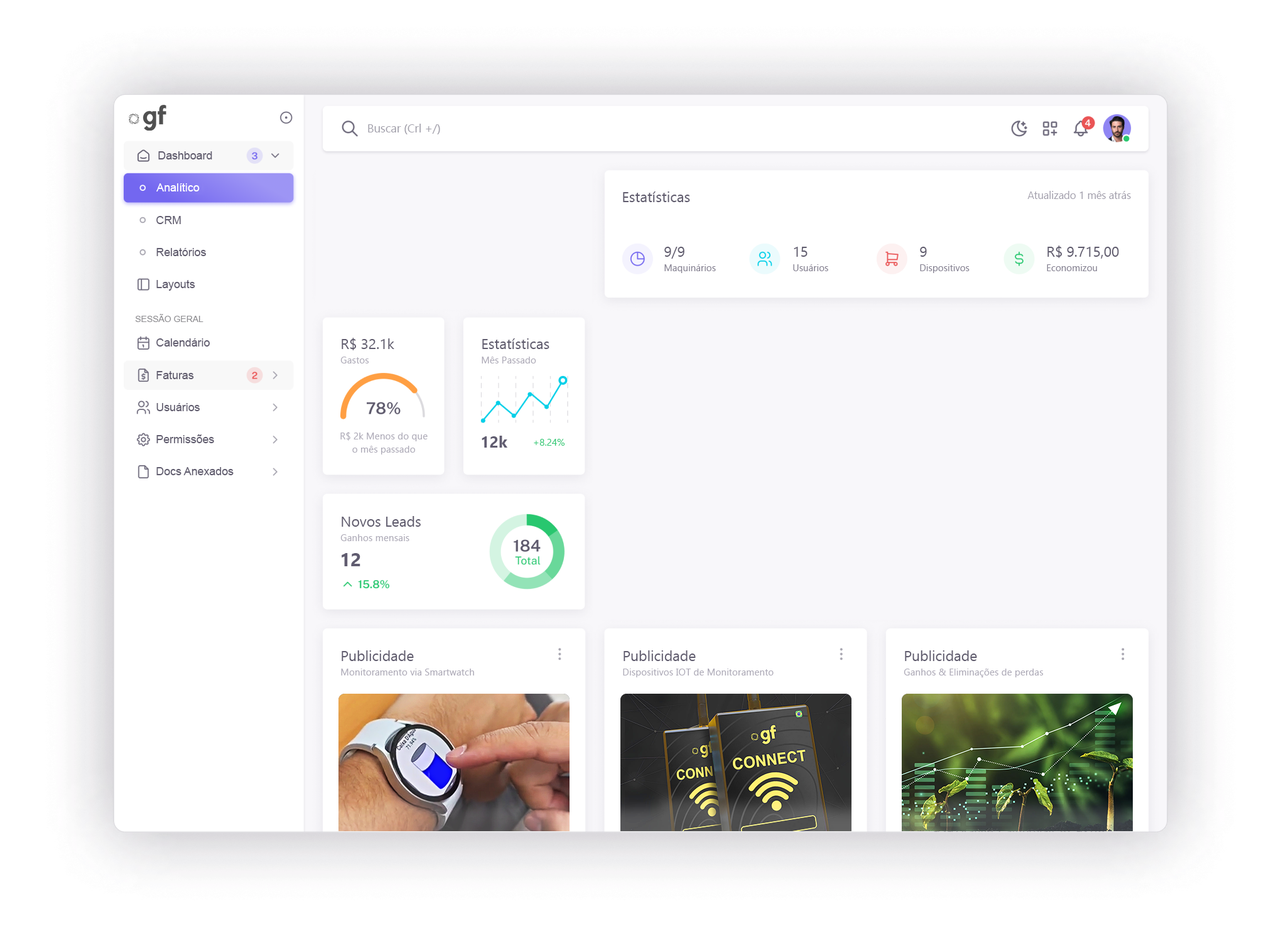
<style>
.page{position:relative;width:1281px;height:931px;background:#ffffff}
.page>*{position:absolute;margin:0}
.t1{font:11.6px "Ebrima";color:#a3a1ac}
.t2{font:11.4px "ArialMT";color:#605c6e}
.t3{font:11.4px "ArialMT";color:#ffffff}
.t4{font:14.4px "Ebrima";color:#605c6e}
.t5{font:10.4px "Ebrima";color:#a29fac}
.t6{font:9.5px "Ebrima";color:#888494}
.t7{font:9px "ArialMT";color:#8f8e92}
.t8{font:9.6px "Ebrima";color:#afacb9}
.t9{font:9.6px/12.6px "Ebrima";color:#afacb9}
.t10{font:15.9px "Ebrima-Bold";color:#605c70}
.t11{font:9.6px "Ebrima";color:#35ca78}
.t12{font:18.6px "Ebrima-Bold";color:#605c70}
</style>
<div class="page">
<p class="t1" style="left:368px;top:124px;width:72px;height:10px">Buscar (Crl +/)</p>
<p class="t2" style="left:158px;top:151px;width:54px;height:8px">Dashboard</p>
<p class="t3" style="left:156px;top:183px;width:44px;height:8px">Analítico</p>
<p class="t4" style="left:623px;top:191px;width:67px;height:11px">Estatísticas</p>
<p class="t5" style="left:1027px;top:191px;width:104px;height:8px">Atualizado 1 mês atrás</p>
<p class="t2" style="left:156px;top:216px;width:25px;height:8px">CRM</p>
<p class="t4" style="left:1047px;top:245px;width:72px;height:14px">R$ 9.715,00</p>
<p class="t2" style="left:156px;top:248px;width:50px;height:8px">Relatórios</p>
<p class="t4" style="left:664px;top:247px;width:20px;height:12px">9/9</p>
<p class="t4" style="left:794px;top:247px;width:13px;height:10px">15</p>
<p class="t4" style="left:920px;top:247px;width:7px;height:10px">9</p>
<p class="t6" style="left:664px;top:264px;width:52px;height:9px">Maquinários</p>
<p class="t6" style="left:793px;top:264px;width:35px;height:7px">Usuários</p>
<p class="t6" style="left:920px;top:264px;width:49px;height:9px">Dispositivos</p>
<p class="t6" style="left:1047px;top:264px;width:50px;height:7px">Economizou</p>
<p class="t2" style="left:156px;top:280px;width:39px;height:11px">Layouts</p>
<p class="t7" style="left:135px;top:314px;width:68px;height:8px">SESSÃO GERAL</p>
<p class="t2" style="left:156px;top:338px;width:54px;height:9px">Calendário</p>
<p class="t4" style="left:342px;top:338px;width:52px;height:12px">R$ 32.1k</p>
<p class="t4" style="left:482px;top:338px;width:67px;height:11px">Estatísticas</p>
<p class="t8" style="left:340px;top:357px;width:29px;height:7px">Gastos</p>
<p class="t8" style="left:482px;top:357px;width:54px;height:7px">Mês Passado</p>
<p class="t2" style="left:156px;top:371px;width:38px;height:8px">Faturas</p>
<p class="t2" style="left:156px;top:403px;width:44px;height:8px">Usuários</p>
<p class="t2" style="left:156px;top:434px;width:58px;height:9px">Permissões</p>
<p class="t9" style="left:340px;top:432px;width:88px;height:23px;text-align:center">R$ 2k Menos do que<br>o mês passado</p>
<p class="t10" style="left:482px;top:436px;width:25px;height:12px">12k</p>
<p class="t11" style="left:534px;top:439px;width:31px;height:7px">+8.24%</p>
<p class="t2" style="left:156px;top:467px;width:78px;height:8px">Docs Anexados</p>
<p class="t4" style="left:342px;top:516px;width:79px;height:11px">Novos Leads</p>
<p class="t8" style="left:340px;top:534px;width:69px;height:7px">Ganhos mensais</p>
<p class="t12" style="left:342px;top:553px;width:18px;height:13px">12</p>
<p class="t4" style="left:342px;top:650px;width:72px;height:11px">Publicidade</p>
<p class="t4" style="left:623px;top:650px;width:73px;height:11px">Publicidade</p>
<p class="t4" style="left:905px;top:650px;width:72px;height:11px">Publicidade</p>
<p class="t8" style="left:341px;top:669px;width:133px;height:7px">Monitoramento via Smartwatch</p>
<p class="t8" style="left:623px;top:669px;width:150px;height:8px">Dispositivos IOT de Monitoramento</p>
<p class="t8" style="left:903px;top:669px;width:140px;height:8px">Ganhos &amp; Eliminações de perdas</p>
</div>
